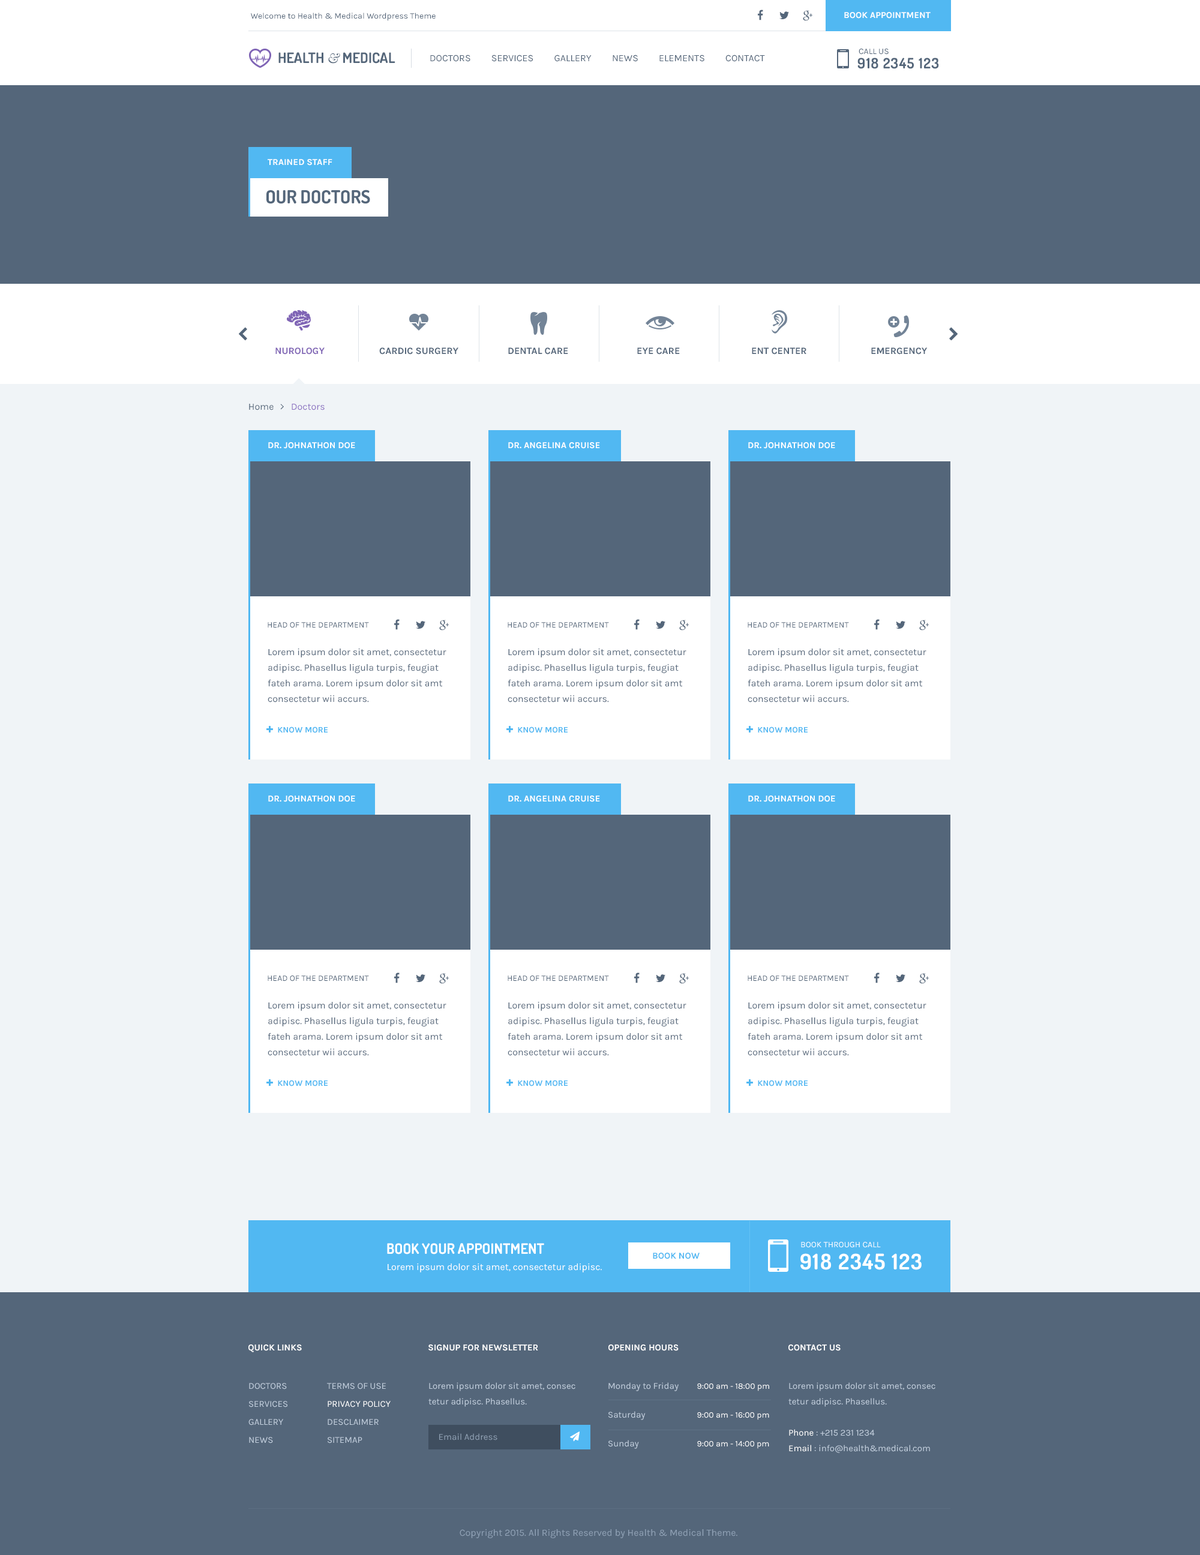
<style>
.page{position:relative;width:1200px;height:1555px;background:#54667a}
.page>*{position:absolute;margin:0}
.t1{font:8.4px "Karla-Regular";color:#54667a}
.t2{font:9px "Karla-Bold";color:#ffffff;text-transform:uppercase}
.t3{font:14.4px "Dosis-Bold";color:#54667a}
.t4{font:14.4px "Baskerville-Italic";color:#54667a}
.t5{font:9.6px "Karla-Regular";color:#54667a;text-transform:uppercase}
.t6{font:14.4px "Dosis-Bold";letter-spacing:0.05em;color:#54667a}
.t7{font:18px "Dosis-Bold";color:#54667a}
.t8{font:9.6px "Karla-Bold";color:#7f64b5;text-transform:uppercase}
.t9{font:9.6px "Karla-Bold";color:#54667a;text-transform:uppercase}
.t10{font:9.6px/15.6px "Karla-Regular";color:#54667a}
.t11{font:14.4px "Dosis-Bold";color:#ffffff}
.t12{font:9px "Karla-Bold";color:#51b8f2;text-transform:uppercase}
.t13{font:21.6px "Dosis-Bold";letter-spacing:0.05em;color:#ffffff}
.t14{font:8.4px "Karla-Regular";color:#ffffff}
.t15{font:9.6px "Karla-Regular";color:#ffffff}
.t16{font:9px/18px "Karla-Regular";color:#c2cfde;text-transform:uppercase}
.t17{font:9px/18px "Karla-Regular";color:#ffffff;text-transform:uppercase}
.t18{font:9px/15.6px "Karla-Regular";color:#c2cfde}
.t19{font:9px/28.8px "Karla-Regular";color:#c2cfde}
.t20{font:8.4px/28.8px "Karla-Regular";color:#ffffff}
.t21{font:9px/15.6px "Karla-Regular";color:#ffffff}
.t22{font:9px "Karla-Regular";color:#8e9fb2}
.t23{font:9.6px "Karla-Regular";color:#8fa1b5}
</style>
<div class="page">
<p class="t1" style="left:251px;top:13px;width:185px;height:8px">Welcome to Health &amp; Medical Wordpress Theme</p>
<p class="t2" style="left:844px;top:12px;width:87px;height:7px">BOOK APPOINTMENT</p>
<p class="t3" style="left:278px;top:52px;width:117px;height:12px">HEALTH <span class="t4">&amp;</span> MEDICAL</p>
<p class="t1" style="left:859px;top:49px;width:30px;height:6px">CALL US</p>
<p class="t5" style="left:430px;top:55px;width:335px;height:7px">Doctors         Services         Gallery         News         Elements         Contact</p>
<p class="t6" style="left:857px;top:58px;width:82px;height:11px">918 2345 123</p>
<p class="t2" style="left:268px;top:159px;width:64px;height:7px">TRAINED STAFF</p>
<p class="t7" style="left:266px;top:190px;width:104px;height:14px">OUR DOCTORS</p>
<p class="t8" style="left:275px;top:347px;width:50px;height:8px">NUROLOGY</p>
<p class="t9" style="left:379px;top:347px;width:79px;height:8px">CARDIC SURGERY</p>
<p class="t9" style="left:508px;top:347px;width:60px;height:8px">DENTAL CARE</p>
<p class="t9" style="left:637px;top:347px;width:43px;height:8px">EYE CARE</p>
<p class="t9" style="left:752px;top:347px;width:54px;height:8px">ENT CENTER</p>
<p class="t9" style="left:871px;top:347px;width:57px;height:8px">EMERGENCY</p>
<p class="t2" style="left:268px;top:442px;width:87px;height:7px">DR. JOHNATHON DOE</p>
<p class="t2" style="left:508px;top:442px;width:92px;height:7px">DR. ANGELINA CRUISE</p>
<p class="t2" style="left:748px;top:442px;width:87px;height:7px">DR. JOHNATHON DOE</p>
<p class="t1" style="left:268px;top:622px;width:101px;height:6px">HEAD OF THE DEPARTMENT</p>
<p class="t1" style="left:508px;top:622px;width:101px;height:6px">HEAD OF THE DEPARTMENT</p>
<p class="t1" style="left:748px;top:622px;width:101px;height:6px">HEAD OF THE DEPARTMENT</p>
<p class="t10" style="left:268px;top:649px;width:178px;height:54px">Lorem ipsum dolor sit amet, consectetur <br>adipisc. Phasellus ligula turpis, feugiat <br>fateh arama. Lorem ipsum dolor sit amt<br>consectetur wii accurs.</p>
<p class="t10" style="left:508px;top:649px;width:178px;height:54px">Lorem ipsum dolor sit amet, consectetur <br>adipisc. Phasellus ligula turpis, feugiat <br>fateh arama. Lorem ipsum dolor sit amt<br>consectetur wii accurs.</p>
<p class="t10" style="left:748px;top:649px;width:178px;height:54px">Lorem ipsum dolor sit amet, consectetur <br>adipisc. Phasellus ligula turpis, feugiat <br>fateh arama. Lorem ipsum dolor sit amt<br>consectetur wii accurs.</p>
<p class="t2" style="left:268px;top:796px;width:87px;height:6px">DR. JOHNATHON DOE</p>
<p class="t2" style="left:508px;top:796px;width:92px;height:6px">DR. ANGELINA CRUISE</p>
<p class="t2" style="left:748px;top:796px;width:87px;height:6px">DR. JOHNATHON DOE</p>
<p class="t1" style="left:268px;top:976px;width:101px;height:6px">HEAD OF THE DEPARTMENT</p>
<p class="t1" style="left:508px;top:976px;width:101px;height:6px">HEAD OF THE DEPARTMENT</p>
<p class="t1" style="left:748px;top:976px;width:101px;height:6px">HEAD OF THE DEPARTMENT</p>
<p class="t10" style="left:268px;top:1002px;width:178px;height:54px">Lorem ipsum dolor sit amet, consectetur <br>adipisc. Phasellus ligula turpis, feugiat <br>fateh arama. Lorem ipsum dolor sit amt<br>consectetur wii accurs.</p>
<p class="t10" style="left:508px;top:1002px;width:178px;height:54px">Lorem ipsum dolor sit amet, consectetur <br>adipisc. Phasellus ligula turpis, feugiat <br>fateh arama. Lorem ipsum dolor sit amt<br>consectetur wii accurs.</p>
<p class="t10" style="left:748px;top:1002px;width:178px;height:54px">Lorem ipsum dolor sit amet, consectetur <br>adipisc. Phasellus ligula turpis, feugiat <br>fateh arama. Lorem ipsum dolor sit amt<br>consectetur wii accurs.</p>
<p class="t11" style="left:387px;top:1243px;width:157px;height:12px">BOOK YOUR APPOINTMENT</p>
<p class="t12" style="left:653px;top:1253px;width:47px;height:6px">BOOK NOW</p>
<p class="t13" style="left:800px;top:1253px;width:122px;height:17px">918 2345 123</p>
<p class="t14" style="left:801px;top:1242px;width:80px;height:6px">BOOK THROUGH CALL</p>
<p class="t15" style="left:388px;top:1264px;width:214px;height:9px">Lorem ipsum dolor sit amet, consectetur adipisc.</p>
<p class="t2" style="left:248px;top:1345px;width:54px;height:7px">QUICK LINKS</p>
<p class="t2" style="left:428px;top:1345px;width:110px;height:6px">Signup For Newsletter</p>
<p class="t2" style="left:608px;top:1345px;width:71px;height:6px">Opening Hours</p>
<p class="t2" style="left:788px;top:1345px;width:53px;height:6px">Contact Us</p>
<p class="t16" style="left:248px;top:1383px;width:39px;height:61px">Doctors         <br>Services         <br>Gallery         <br>News</p>
<p class="t16" style="left:327px;top:1383px;width:64px;height:61px">Terms of Use<br><span class="t17">Privacy Policy<br></span>Desclaimer<br>Sitemap</p>
<p class="t18" style="left:428px;top:1382px;width:147px;height:25px">Lorem ipsum dolor sit amet, consec<br>tetur adipisc. Phasellus.</p>
<p class="t19" style="left:608px;top:1382px;width:71px;height:67px">Monday to Friday<br>Saturday<br>Sunday</p>
<p class="t20" style="left:697px;top:1384px;width:72px;height:65px">9:00 am - 18:00 pm<br>9:00 am - 16:00 pm<br>9:00 am - 14:00 pm</p>
<p class="t18" style="left:788px;top:1382px;width:147px;height:71px">Lorem ipsum dolor sit amet, consec<br>tetur adipisc. Phasellus.<br><br><span class="t21">Phone</span> : +215 231 1234<br><span class="t21">Email</span> : info@health&amp;medical.com</p>
<p class="t22" style="left:439px;top:1433px;width:58px;height:8px">Email Address</p>
<p class="t23" style="left:460px;top:1529px;width:277px;height:9px">Copyright 2015. All Rights Reserved by Health &amp; Medical Theme.</p>
</div>
